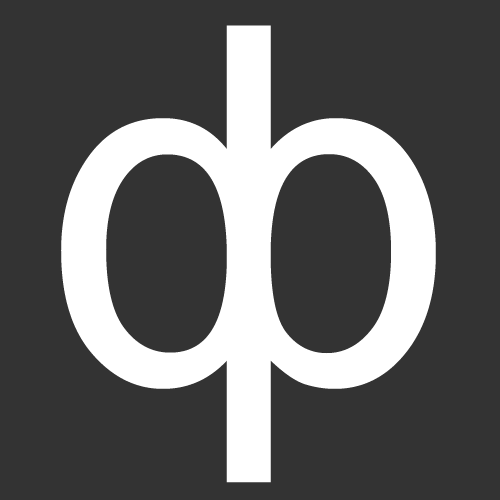
<style>
.page{position:relative;width:500px;height:500px;background:#333333}
.page>*{position:absolute;margin:0}
.t1{font:499.6px "ArialMT";letter-spacing:0.005em;color:#ffffff}
</style>
<div class="page">
<p class="t1" style="left:61px;top:25px;width:375px;height:458px">ф</p>
</div>
